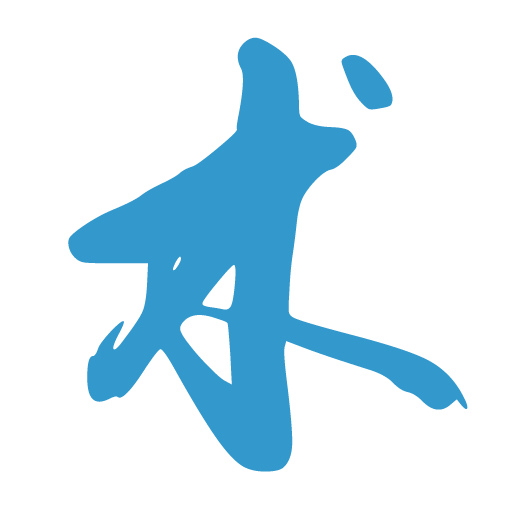
<style>
.page{position:relative;width:512px;height:512px;background:#ffffff}
.page>*{position:absolute;margin:0}
.t1{font:511px "Li-Xuke";color:#3399cc}
</style>
<div class="page">
<p class="t1" style="left:68px;top:37px;width:400px;height:435px">术</p>
</div>
